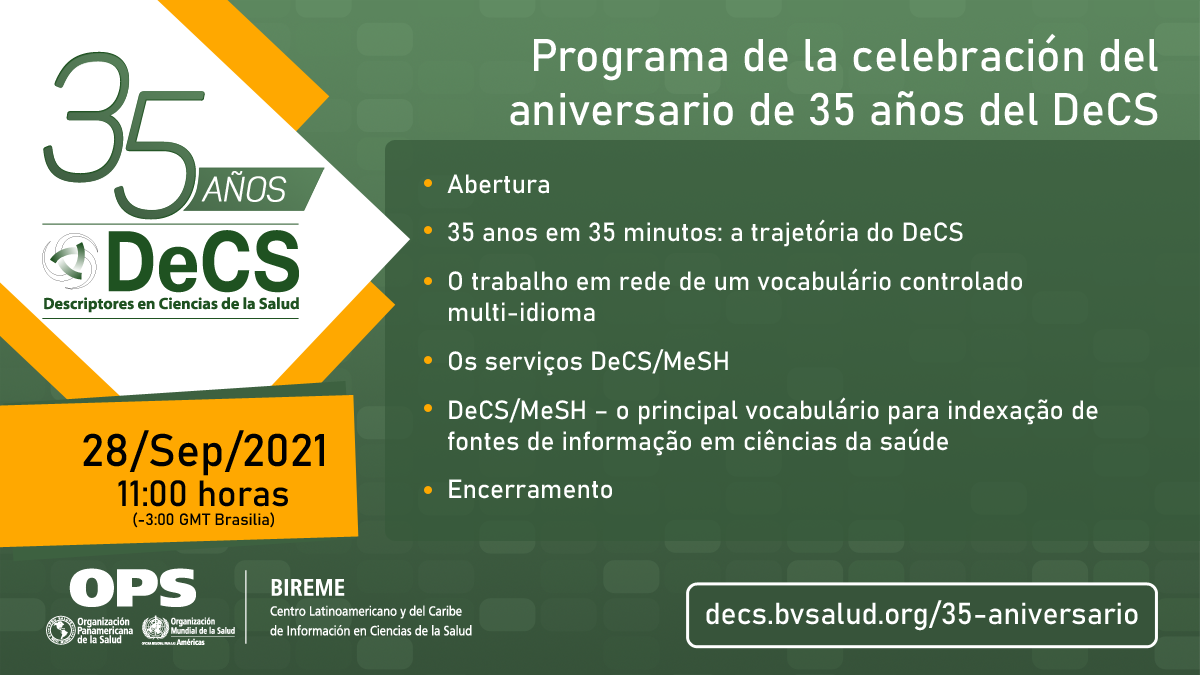
<style>
.page{position:relative;width:1200px;height:675px}
.page>*{position:absolute;margin:0}
.t1{font:45px "Bahnschrift";color:#ffffff}
.t2{font:174.1px "Panton-LightitalicCaps";color:#4b6f4d;font-weight:bold;scale:0.9 1}
.t3{font:174.1px "Panton-LightitalicCaps";color:#4d714f;font-weight:bold;scale:0.9 1}
.t4{font:34.3px "Panton-LightitalicCaps";color:#ffffff;font-weight:bold;scale:0.9 1}
.t5{font:26px "Bahnschrift";color:#ffffff}
.t6{font:45.1px "Bahnschrift";color:#000000}
.t7{font:16.1px "Bahnschrift";color:#000000}
.t8{font:36px "Bahnschrift";color:#000000}
.t9{font:30px "Bahnschrift";color:#ffffff}
</style>
<div class="page">
<p class="t1" style="left:510px;top:33px;width:648px;height:93px;text-align:right">Programa de la celebración del<br>aniversario de 35 años del DeCS​</p>
<p class="t2" style="left:43px;top:51px;width:86px;height:132px">3</p>
<p class="t3" style="left:114px;top:91px;width:91px;height:129px">5</p>
<p class="t4" style="left:201px;top:171px;width:86px;height:31px">años</p>
<p class="t5" style="left:447px;top:174px;width:651px;height:325px">Abertura<br>35 anos em 35 minutos: a trajetória do DeCS<br>O trabalho em rede de um vocabulário controlado multi-idioma​<br>Os serviços DeCS/MeSH<br>DeCS/MeSH – o principal vocabulário para indexação de fontes de informação em ciências da saúde<br>Encerramento</p>
<p class="t6" style="left:83px;top:430px;width:241px;height:46px">28/Sep/2021</p>
<p class="t7" style="left:118px;top:480px;width:170px;height:48px;text-align:center"><span class="t8">11:00 horas<br></span>(-3:00 GMT Brasilia)</p>
<p class="t9" style="left:706px;top:600px;width:432px;height:31px">decs.bvsalud.org/35-aniversario</p>
</div>
